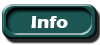
<style>
.page{position:relative;width:100px;height:45px;background:#1c5653}
.page>*{position:absolute;margin:0}
.t1{font:18px "ErasITC-Bold";color:#ffffff}
</style>
<div class="page">
<p class="t1" style="left:31px;top:16px;width:37px;height:12px">Info</p>
</div>
